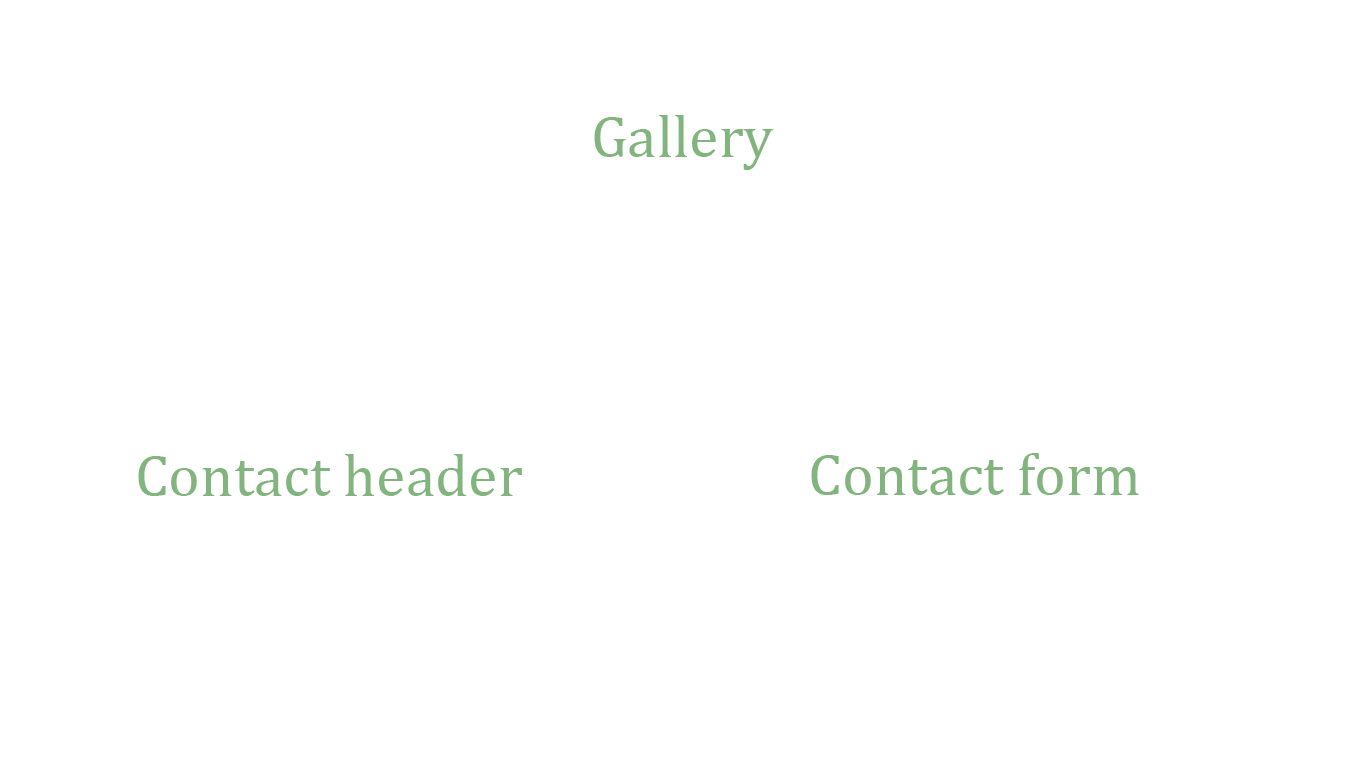
<style>
.page{position:relative;width:1366px;height:768px;background:#ffffff}
.page>*{position:absolute;margin:0}
.t1{font:60px "CambriaMath";color:#82b57d}
</style>
<div class="page">
<p class="t1" style="left:594px;top:115px;width:180px;height:55px">Gallery</p>
<p class="t1" style="left:138px;top:454px;width:384px;height:42px">Contact header</p>
<p class="t1" style="left:811px;top:453px;width:328px;height:42px">Contact form</p>
</div>
